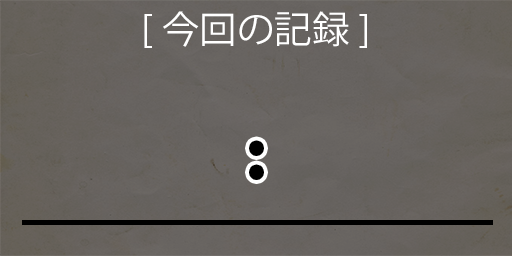
<style>
.page{position:relative;width:512px;height:256px}
.page>*{position:absolute;margin:0}
.t1{font:37.5px "KozGoPr6N-Regular";color:#ffffff}
.t2{font:58.3px "KozGoPr6N-Regular";color:#000000}
</style>
<div class="page">
<p class="t1" style="left:144px;top:11px;width:223px;height:37px">[今回の記録]</p>
<p class="t2" style="left:253px;top:144px;width:7px;height:32px">:</p>
</div>
